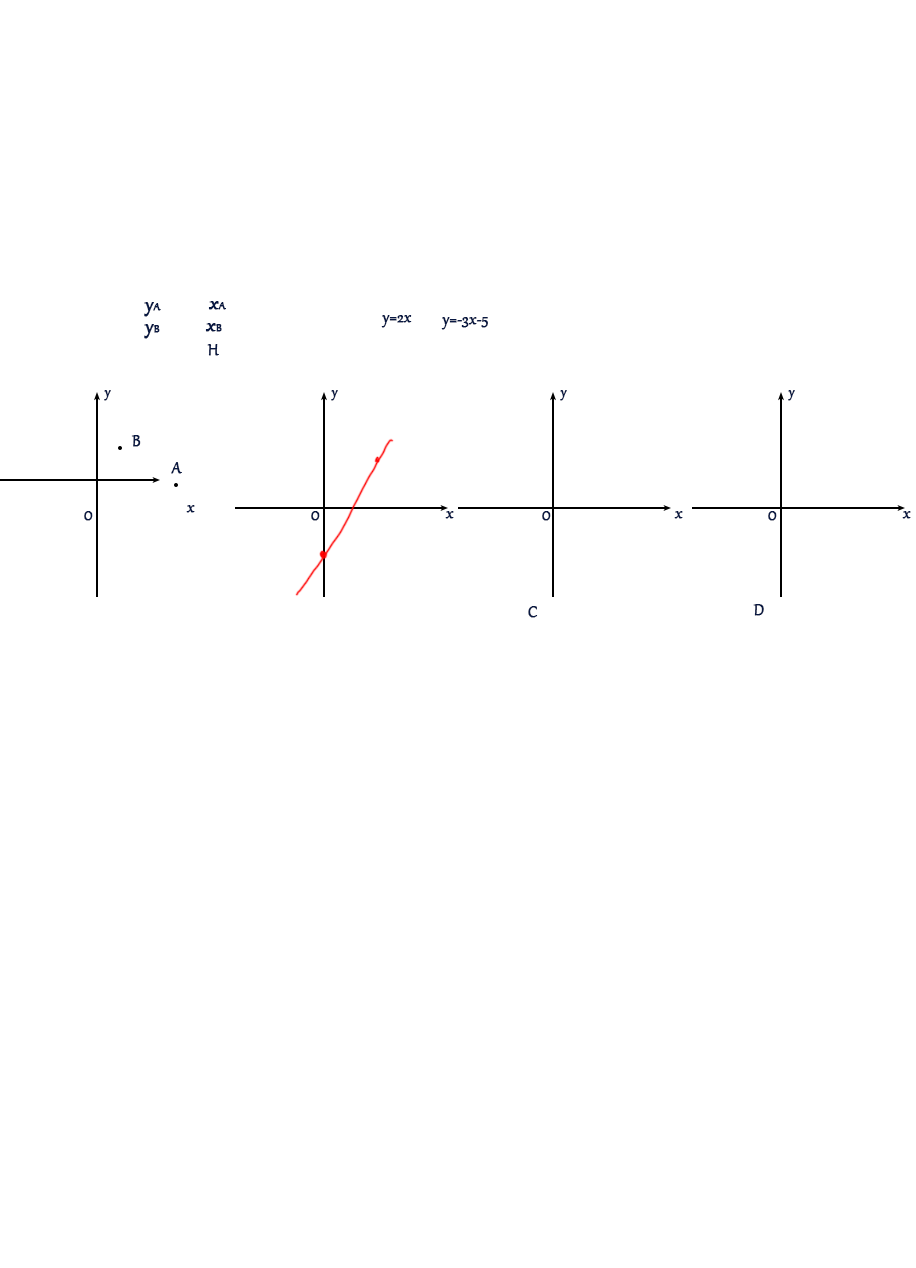
<style>
.page{position:relative;width:916px;height:1268px;background:#ffffff}
.page>*{position:absolute;margin:0}
.t1{font:24px "Gabriola";color:#081842;font-weight:bold}
.t2{font:13.3px "Gabriola";color:#081842;font-weight:bold}
.t3{font:18.7px "Gabriola";color:#081842;font-weight:bold}
.t4{font:16px "Gabriola";color:#081842;font-weight:bold}
</style>
<div class="page">
<p class="t1" style="left:144px;top:302px;width:17px;height:15px">y<span class="t2">A</span></p>
<p class="t1" style="left:208px;top:301px;width:18px;height:9px">x<span class="t2">A</span></p>
<p class="t3" style="left:381px;top:315px;width:31px;height:13px">y=2x</p>
<p class="t3" style="left:441px;top:317px;width:47px;height:13px">y=-3x-5</p>
<p class="t1" style="left:144px;top:324px;width:16px;height:15px">y<span class="t2">B</span></p>
<p class="t1" style="left:205px;top:323px;width:17px;height:9px">x<span class="t2">B</span></p>
<p class="t3" style="left:207px;top:344px;width:12px;height:12px">H</p>
<p class="t4" style="left:104px;top:390px;width:7px;height:11px">y</p>
<p class="t4" style="left:331px;top:390px;width:7px;height:11px">y</p>
<p class="t4" style="left:560px;top:390px;width:7px;height:11px">y</p>
<p class="t4" style="left:788px;top:390px;width:7px;height:11px">y</p>
<p class="t3" style="left:131px;top:435px;width:10px;height:12px">B</p>
<p class="t3" style="left:171px;top:462px;width:11px;height:12px">A</p>
<p class="t3" style="left:186px;top:505px;width:9px;height:8px">x</p>
<p class="t4" style="left:84px;top:511px;width:9px;height:10px">O</p>
<p class="t4" style="left:311px;top:511px;width:9px;height:10px">O</p>
<p class="t3" style="left:445px;top:511px;width:9px;height:8px">x</p>
<p class="t4" style="left:542px;top:511px;width:9px;height:10px">O</p>
<p class="t3" style="left:674px;top:511px;width:9px;height:8px">x</p>
<p class="t4" style="left:768px;top:511px;width:9px;height:10px">O</p>
<p class="t3" style="left:902px;top:511px;width:9px;height:8px">x</p>
<p class="t3" style="left:528px;top:606px;width:10px;height:12px">C</p>
<p class="t3" style="left:753px;top:604px;width:11px;height:12px">D</p>
</div>
